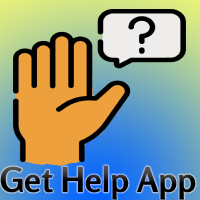
<style>
.page{position:relative;width:200px;height:200px}
.page>*{position:absolute;margin:0}
.t1{font:34px "Rosario-Bold";color:#000000}
</style>
<div class="page">
<p class="t1" style="left:0px;top:165px;width:196px;height:35px">Get Help App</p>
</div>
